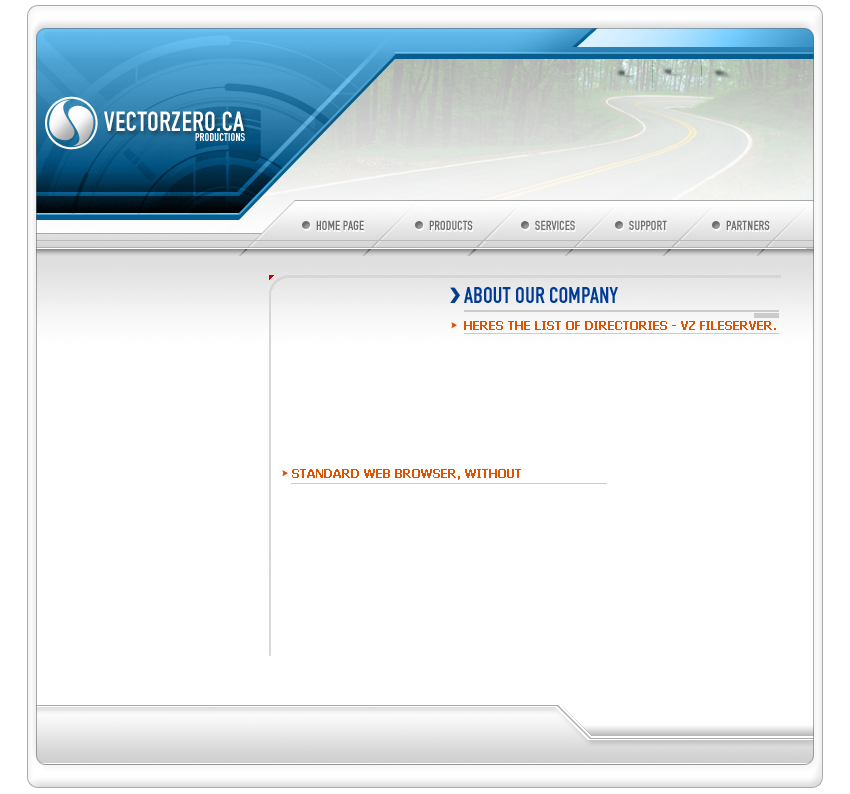
<style>
.page{position:relative;width:850px;height:794px;background:#ffffff}
.page>*{position:absolute;margin:0}
.t1{font:29.2px "FetteEngschrift";color:#ffffff;text-transform:uppercase}
.t2{font:12px "FetteEngschrift";color:#ffffff;text-transform:uppercase}
.t3{font:14px "FetteEngschrift";color:#6e6e6e;text-transform:uppercase}
.t4{font:24px "FetteEngschrift";color:#003c95;text-transform:uppercase}
.t5{font:12px "Tahoma-Bold";color:#dd5300;text-transform:uppercase}
</style>
<div class="page">
<p class="t1" style="left:104px;top:111px;width:140px;height:20px">VEctorZERO.CA</p>
<p class="t2" style="left:195px;top:133px;width:50px;height:8px">Productions</p>
<p class="t3" style="left:316px;top:220px;width:48px;height:10px">Home Page</p>
<p class="t3" style="left:429px;top:220px;width:44px;height:10px">Products</p>
<p class="t3" style="left:535px;top:220px;width:40px;height:10px">SErvices</p>
<p class="t3" style="left:629px;top:220px;width:38px;height:10px">Support</p>
<p class="t3" style="left:726px;top:220px;width:44px;height:10px">partners</p>
<p class="t4" style="left:464px;top:287px;width:154px;height:16px">About Our Company</p>
<p class="t5" style="left:464px;top:321px;width:312px;height:9px">Heres The List Of Directories - VZ filesErver.</p>
<p class="t5" style="left:292px;top:469px;width:229px;height:11px">standard Web browser, without</p>
</div>
